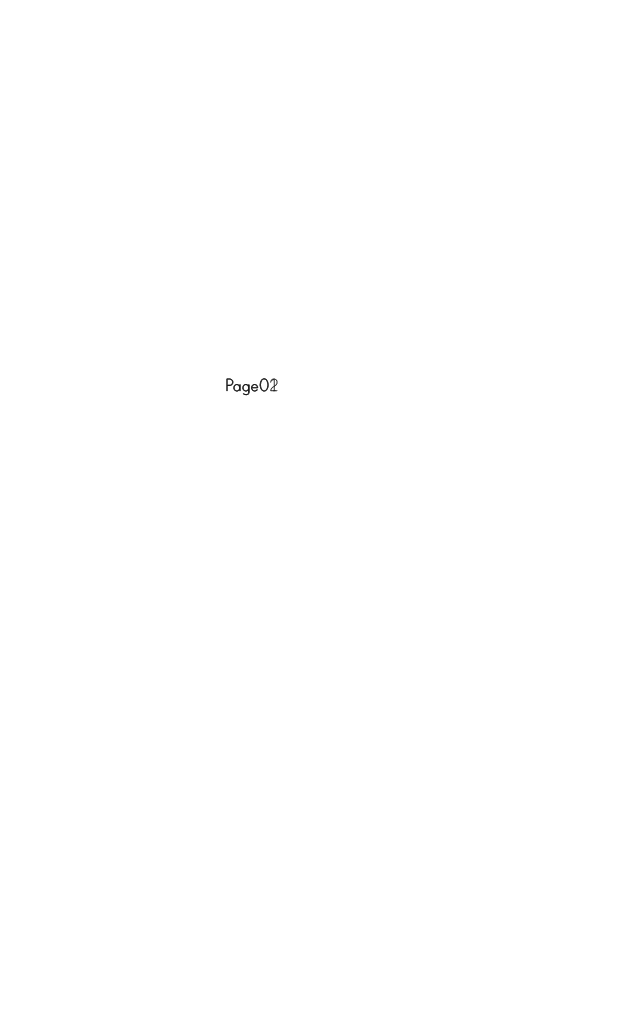
<style>
.page{position:relative;width:640px;height:1024px;background:#ffffff}
.page>*{position:absolute;margin:0}
.t1{font:20px "PrintClearly";color:#191919}
</style>
<div class="page">
<p class="t1" style="left:226px;top:378px;width:52px;height:18px">Page02</p>
<p class="t1" style="left:226px;top:378px;width:50px;height:18px">Page01</p>
</div>
